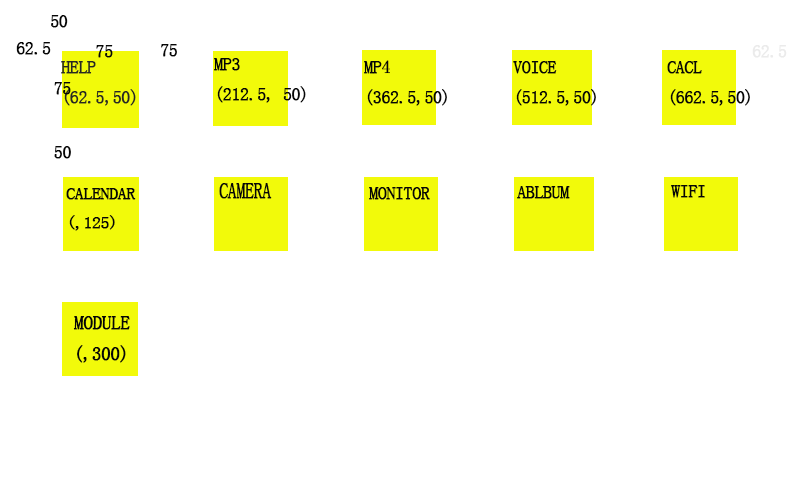
<style>
.page{position:relative;width:800px;height:480px;background:#ffffff}
.page>*{position:absolute;margin:0}
.t1{font:18px "SimSun";letter-spacing:-0.05em;color:#060606;text-transform:uppercase;font-weight:bold}
.t2{font:18px "SimSun";letter-spacing:-0.05em;color:#ebebeb;text-transform:uppercase;font-weight:bold}
.t3{font:18px/30px "SimSun";letter-spacing:-0.05em;color:#272822;text-transform:uppercase;font-weight:bold}
.t4{font:18px/30px "SimSun";letter-spacing:-0.05em;color:#060606;text-transform:uppercase;font-weight:bold}
.t5{font:22px "SimSun";letter-spacing:-0.05em;color:#060606;text-transform:uppercase;font-weight:bold;scale:0.82 1}
.t6{font:17.3px/28.8px "SimSun";letter-spacing:-0.05em;color:#060606;text-transform:uppercase;font-weight:bold;scale:1.04 1}
.t7{font:18.8px/31.3px "SimSun";letter-spacing:-0.05em;color:#060606;text-transform:uppercase;font-weight:bold;scale:1.03 1}
</style>
<div class="page">
<p class="t1" style="left:51px;top:15px;width:17px;height:13px">50</p>
<p class="t1" style="left:16px;top:42px;width:35px;height:13px">62.5</p>
<p class="t1" style="left:96px;top:45px;width:17px;height:13px">75</p>
<p class="t1" style="left:161px;top:44px;width:16px;height:13px">75</p>
<p class="t2" style="left:752px;top:45px;width:35px;height:13px">62.5</p>
<p class="t3" style="left:61px;top:61px;width:75px;height:45px">help<br>(62.5,50)</p>
<p class="t4" style="left:214px;top:58px;width:92px;height:45px">MP3<br>(212.5, 50)</p>
<p class="t4" style="left:364px;top:60px;width:83px;height:46px">MP4<br>(362.5,50)</p>
<p class="t4" style="left:513px;top:61px;width:83px;height:45px">Voice<br>(512.5,50)</p>
<p class="t4" style="left:667px;top:61px;width:83px;height:45px">CACL<br>(662.5,50)</p>
<p class="t1" style="left:54px;top:82px;width:17px;height:13px">75</p>
<p class="t1" style="left:54px;top:146px;width:17px;height:13px">50</p>
<p class="t5" style="left:219px;top:183px;width:53px;height:16px">CAMERA</p>
<p class="t1" style="left:671px;top:185px;width:34px;height:13px">WIFI</p>
<p class="t6" style="left:66px;top:188px;width:70px;height:43px">CALENDAR<br>(,125)</p>
<p class="t1" style="left:369px;top:187px;width:61px;height:13px">MONITOR</p>
<p class="t1" style="left:517px;top:186px;width:53px;height:13px">ABLBUM</p>
<p class="t7" style="left:73px;top:316px;width:57px;height:47px">MODULE<br>(,300)</p>
</div>
